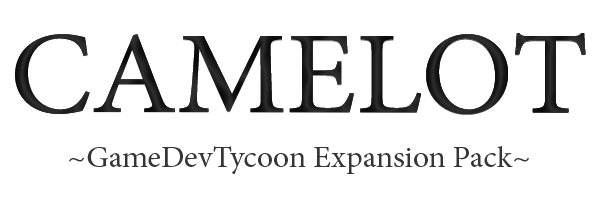
<style>
.page{position:relative;width:600px;height:200px;background:#ffffff}
.page>*{position:absolute;margin:0}
.t1{font:117px "MinionPro-Regular";letter-spacing:-0.006em;color:#2a2a2a;text-transform:uppercase;scale:1.06 1}
.t2{font:30px "MinionPro-Regular";letter-spacing:-0.006em;color:#353535;scale:1.06 1}
</style>
<div class="page">
<p class="t1" style="left:15px;top:34px;width:571px;height:81px">CAMELOT</p>
<p class="t1" style="left:15px;top:33px;width:571px;height:81px">CAMELOT</p>
<p class="t1" style="left:15px;top:33px;width:571px;height:81px">CAMELOT</p>
<p class="t2" style="left:69px;top:146px;width:460px;height:28px">~GameDevTycoon Expansion Pack~</p>
</div>
